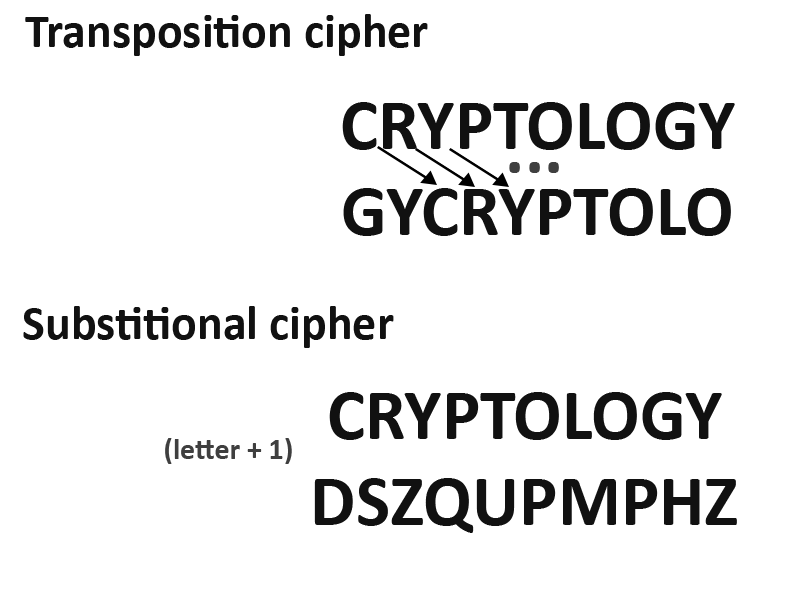
<style>
.page{position:relative;width:800px;height:600px;background:#ffffff}
.page>*{position:absolute;margin:0}
.t1{font:48px "Calibri-Bold";color:#111111}
.t2{font:72px "Calibri-Bold";color:#111111}
.t3{font:72px "Calibri-Bold";color:#3f3f3f}
.t4{font:30px "Calibri-Bold";color:#3f3f3f}
</style>
<div class="page">
<p class="t1" style="left:25px;top:14px;width:403px;height:42px">Transposition cipher</p>
<p class="t2" style="left:342px;top:102px;width:393px;height:134px;text-align:center">CRYPTOLOGY<br>GYCRYPTOLO</p>
<p class="t3" style="left:509px;top:162px;width:50px;height:11px">...</p>
<p class="t1" style="left:23px;top:306px;width:371px;height:42px">Substitional cipher</p>
<p class="t2" style="left:314px;top:392px;width:423px;height:141px;text-align:center">CRYPTOLOGY<br>DSZQUPMPHZ<br><br>D</p>
<p class="t4" style="left:165px;top:438px;width:127px;height:26px">(letter + 1)</p>
</div>
